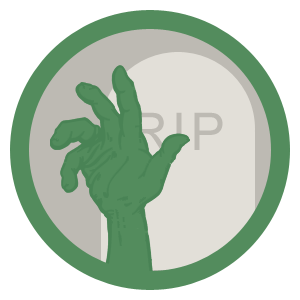
<style>
.page{position:relative;width:300px;height:300px;background:#ffffff}
.page>*{position:absolute;margin:0}
.t1{font:52px "ArialMT";letter-spacing:0.08em;color:#bdbab3}
</style>
<div class="page">
<p class="t1" style="left:134px;top:112px;width:89px;height:38px">RIP</p>
</div>
